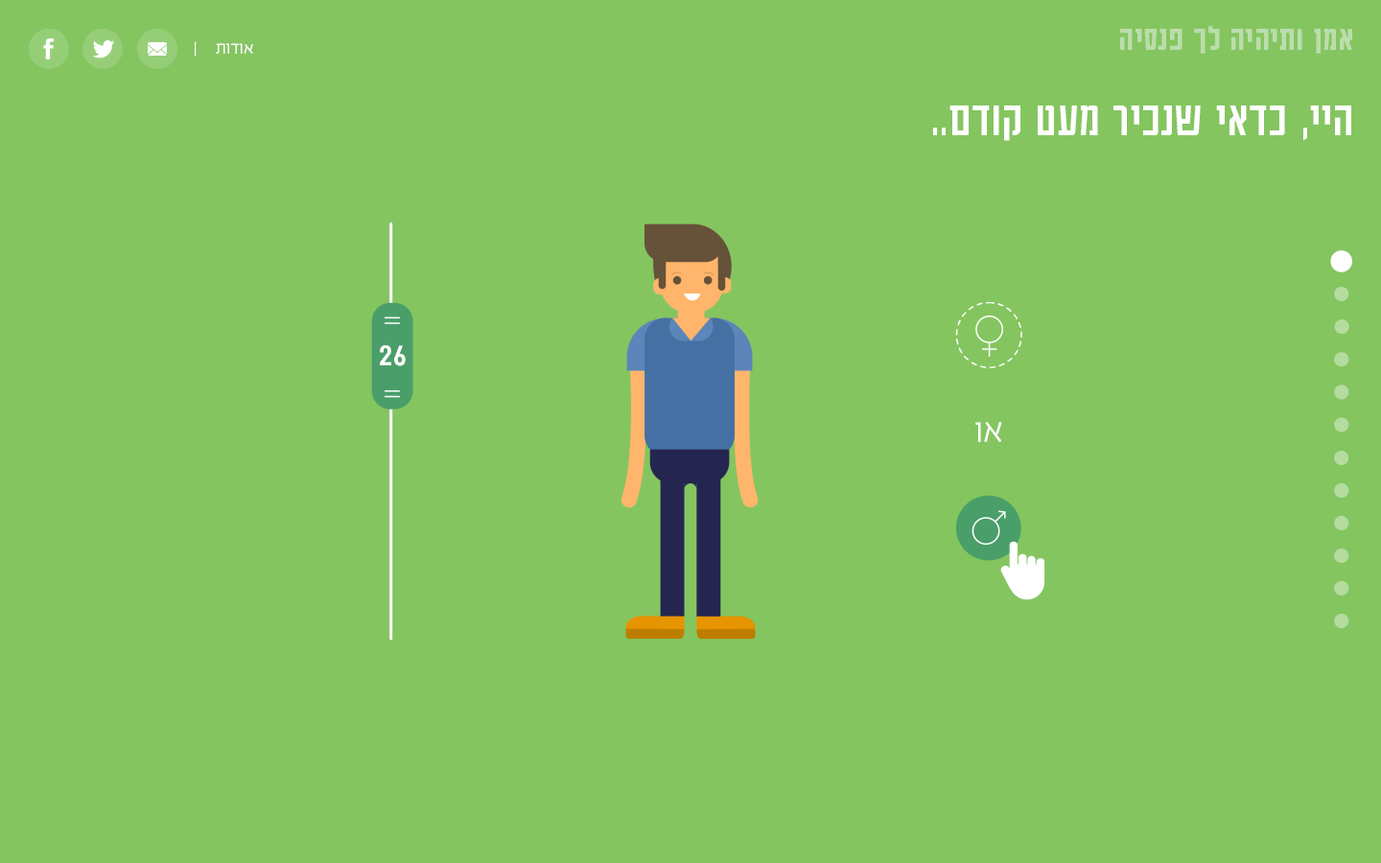
<style>
.page{position:relative;width:1381px;height:863px;background:#84c560}
.page>*{position:absolute;margin:0}
.t1{font:37.8px "AdumaFOT-Medium";color:#bbddab}
.t2{font:19.2px "EzerBlock_OE-Light";color:#ffffff}
.t3{font:53.8px "AdumaFOT-Regular";color:#ffffff}
.t4{font:35.9px "AdumaFOT-Regular";letter-spacing:-0.04em;color:#ffffff;scale:0.94 1}
.t5{font:38.4px "EzerBlock_OE-Light";color:#ffffff}
</style>
<div class="page">
<p class="t1" style="left:1120px;top:26px;width:232px;height:28px">אמן ותיהיה לך פנסיה</p>
<p class="t2" style="left:195px;top:41px;width:58px;height:16px">אודות     |</p>
<p class="t3" style="left:933px;top:106px;width:419px;height:35px">היי, כדאי שנכיר מעט קודם..</p>
<p class="t4" style="left:380px;top:345px;width:26px;height:21px">26</p>
<p class="t5" style="left:976px;top:422px;width:26px;height:20px">או</p>
</div>
